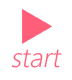
<style>
.page{position:relative;width:72px;height:80px;background:#ffffff}
.page>*{position:absolute;margin:0}
.t1{font:27px "SegoeUI-Light";color:#ff5e79;font-style:italic}
</style>
<div class="page">
<p class="t1" style="left:11px;top:49px;width:51px;height:19px">start</p>
</div>
